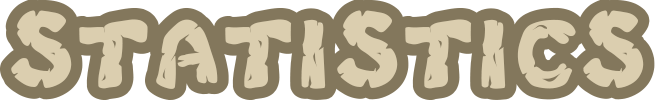
<style>
.page{position:relative;width:655px;height:100px;background:#83775c}
.page>*{position:absolute;margin:0}
.t1{font:144px "Chlorinar-Regular";color:#83775c}
</style>
<div class="page">
<p class="t1" style="left:0px;top:0px;width:655px;height:100px">statistics</p>
</div>
